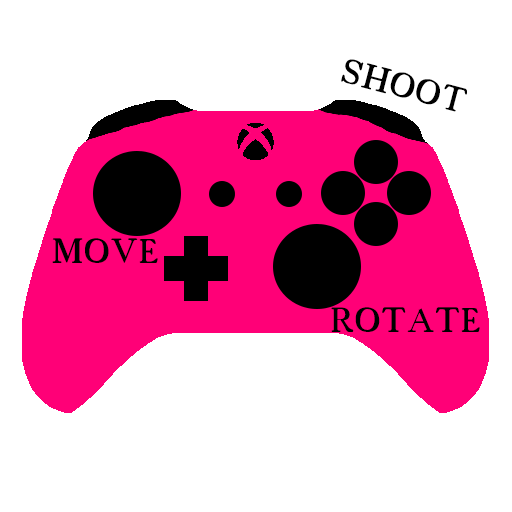
<style>
.page{position:relative;width:512px;height:512px;background:#ffffff}
.page>*{position:absolute;margin:0}
.t1{font:48px "18thCentury";color:#000000}
</style>
<div class="page">
<p class="t1" style="left:341px;top:59px;width:126px;height:53px;rotate:15deg">SHOOT</p>
<p class="t1" style="left:52px;top:238px;width:106px;height:25px">MOVE</p>
<p class="t1" style="left:331px;top:307px;width:149px;height:25px">ROTATE</p>
</div>
